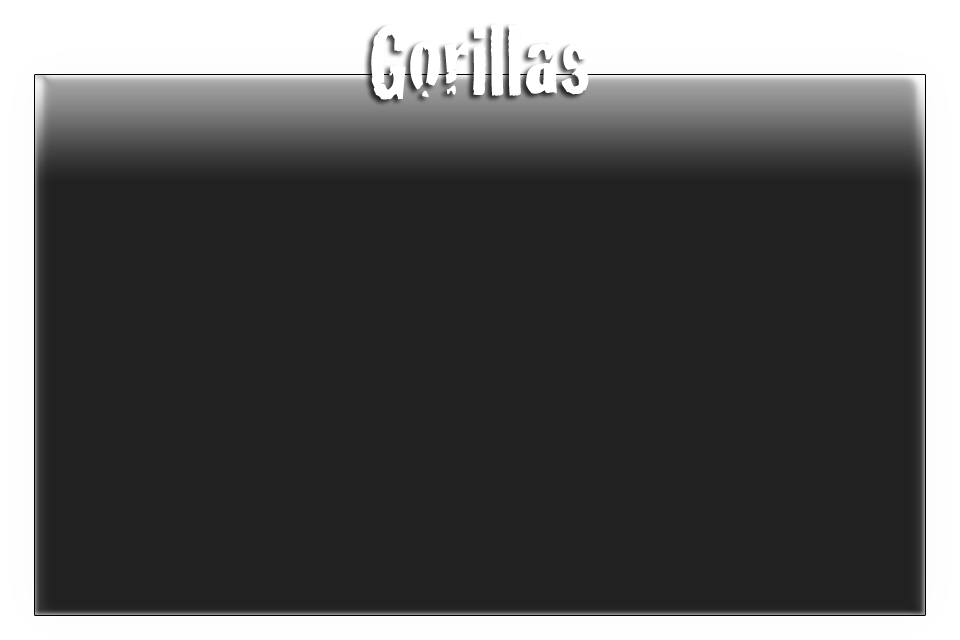
<style>
.page{position:relative;width:960px;height:640px;background:#212121}
.page>*{position:absolute;margin:0}
.t1{font:100px "Cracked";color:#ffffff}
</style>
<div class="page">
<p class="t1" style="left:371px;top:23px;width:218px;height:77px">Gorillas</p>
</div>
